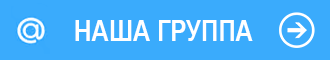
<style>
.page{position:relative;width:330px;height:60px;background:#3aabfc}
.page>*{position:absolute;margin:0}
.t1{font:28.8px "Arial-BoldMT";color:#ffffff;scale:0.83 1}
</style>
<div class="page">
<p class="t1" style="left:75px;top:20px;width:178px;height:21px">НАША ГРУППА</p>
</div>
